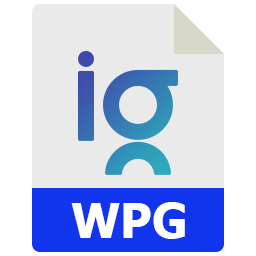
<style>
.page{position:relative;width:256px;height:256px;background:#eaeaea}
.page>*{position:absolute;margin:0}
.t1{font:48px "Tahoma-Bold";color:#ffffff}
</style>
<div class="page">
<p class="t1" style="left:71px;top:202px;width:114px;height:37px">WPG</p>
</div>
